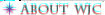
<style>
.page{position:relative;width:105px;height:15px;background:#ffffff}
.page>*{position:absolute;margin:0}
.t1{font:12px "CharlemagneStd-Bold"}
</style>
<div class="page">
<p class="t1" style="left:20px;top:2px;width:82px;height:13px">about  wjc</p>
</div>
